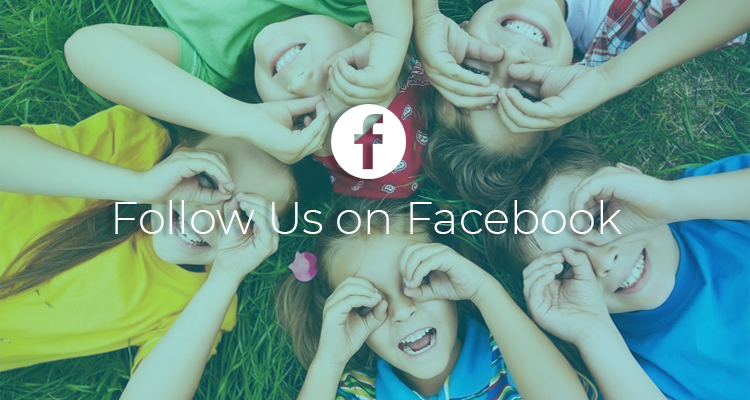
<style>
.page{position:relative;width:750px;height:400px}
.page>*{position:absolute;margin:0}
.t1{font:45px "Montserrat-Light";color:#ffffff}
</style>
<div class="page">
<p class="t1" style="left:115px;top:200px;width:507px;height:34px">Follow Us on Facebook</p>
</div>
